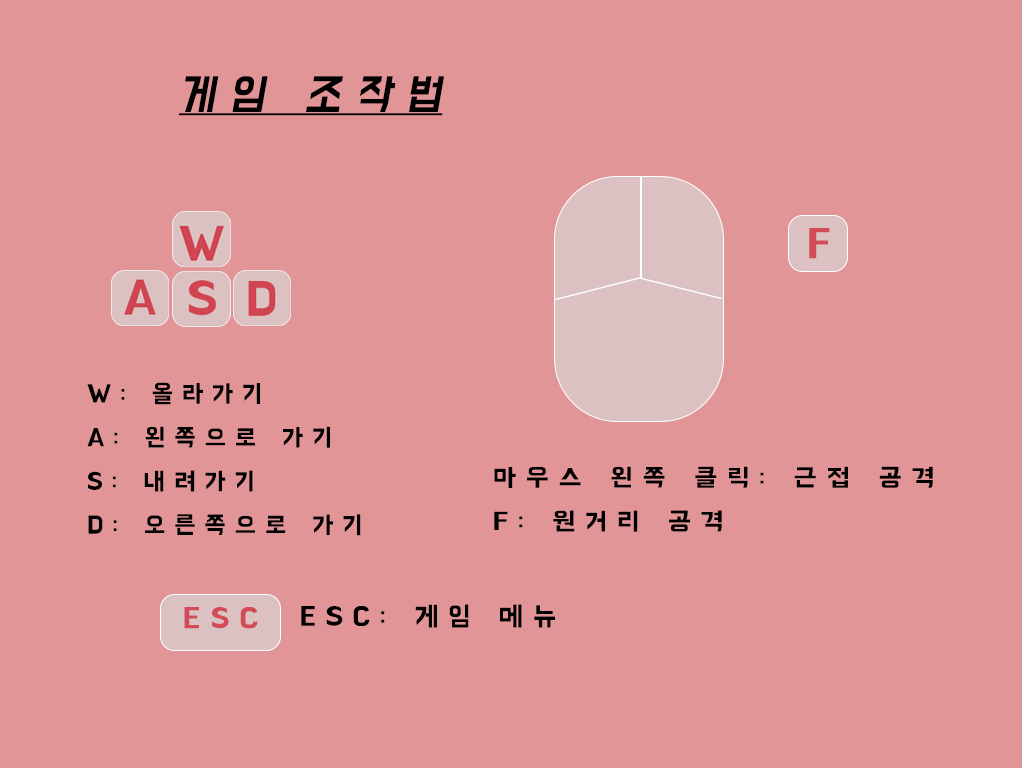
<style>
.page{position:relative;width:1024px;height:768px;background:#e29597}
.page>*{position:absolute;margin:0}
.t1{font:38px "BMDoHyeon-OTF";letter-spacing:0.36em;color:#000000;font-style:italic;text-decoration:underline}
.t2{font:41.7px "BMHANNA11yrsoldOTF";letter-spacing:0.36em;color:#d14c57}
.t3{font:25px "BMHANNA11yrsoldOTF";letter-spacing:0.36em;color:#000000}
.t4{font:25px "BMHANNA11yrsoldOTF";letter-spacing:0.36em;color:#000000;scale:1.09 1}
.t5{font:27.2px "BMHANNA11yrsoldOTF";letter-spacing:0.36em;color:#000000}
</style>
<div class="page">
<p class="t1" style="left:179px;top:76px;width:266px;height:40px">게임 조작법</p>
<p class="t2" style="left:809px;top:228px;width:21px;height:31px">F</p>
<p class="t3" style="left:87px;top:382px;width:274px;height:154px">W: 올라가기<br>A: 왼쪽으로 가기 <br>S: 내려가기<br>D: 오른쪽으로 가기</p>
<p class="t4" style="left:494px;top:466px;width:439px;height:66px">마우스 왼쪽 클릭: 근접 공격<br>F: 원거리 공격</p>
<p class="t5" style="left:301px;top:604px;width:254px;height:24px">ESC: 게임 메뉴</p>
</div>
